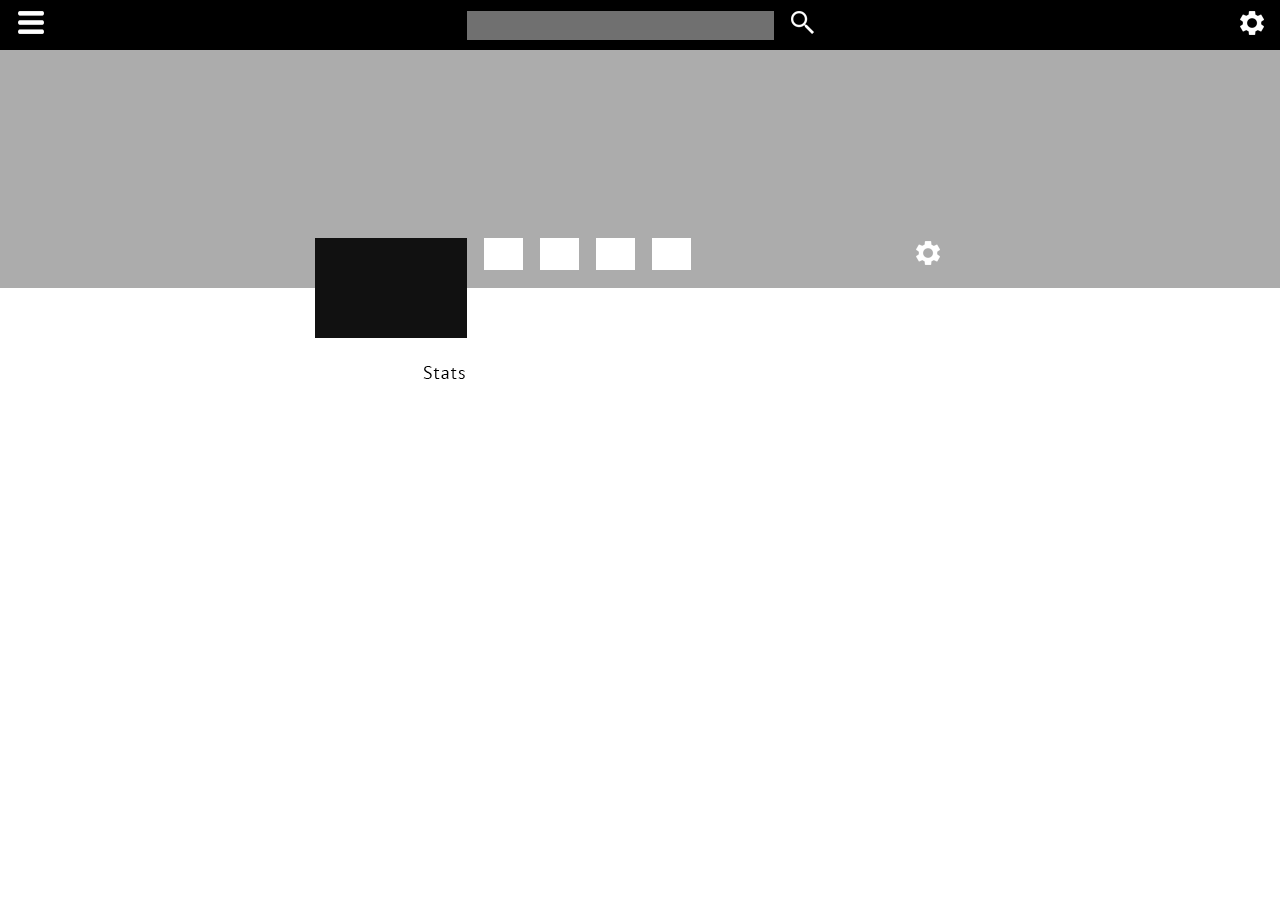
<style>
.page{position:relative;width:1280px;height:903px;background:#ffffff}
.page>*{position:absolute;margin:0}
.t1{font:18px "PTSans-Regular";letter-spacing:0.06em;color:#000000}
</style>
<div class="page">
<p class="t1" style="left:423px;top:366px;width:42px;height:13px">Stats</p>
</div>
